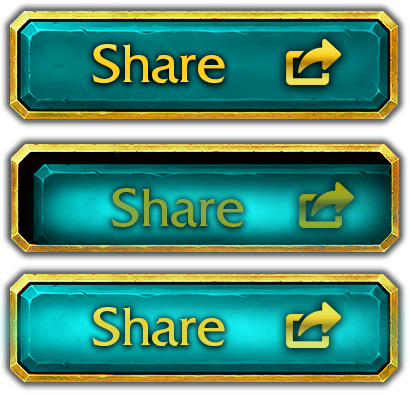
<style>
.page{position:relative;width:410px;height:395px}
.page>*{position:absolute;margin:0}
.t1{font:56px "FrizQuadrataStd";color:#ffd023}
.t2{font:56px "FrizQuadrataStd";color:#e5d649}
</style>
<div class="page">
<p class="t1" style="left:92px;top:44px;width:133px;height:39px">Share</p>
<p class="t2" style="left:92px;top:307px;width:133px;height:39px">Share</p>
</div>
